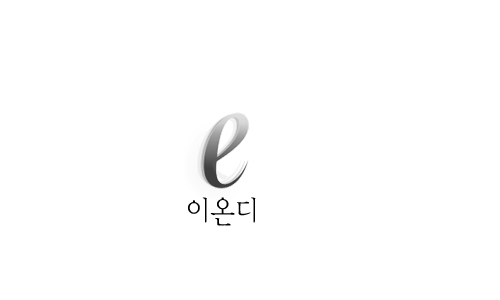
<style>
.page{position:relative;width:500px;height:300px;background:#ffffff}
.page>*{position:absolute;margin:0}
.t1{font:30px "YDIYMjO220";color:#000000;scale:0.9 1}
</style>
<div class="page">
<p class="t1" style="left:188px;top:197px;width:68px;height:29px">이온디</p>
</div>
